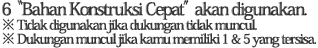
<style>
.page{position:relative;width:318px;height:48px;background:#ffffff}
.page>*{position:absolute;margin:0}
.t1{font:14px/18px "HeiseiMinStd-W7";letter-spacing:-0.08em;color:#343434}
.t2{font:18px/18px "HeiseiMinStd-W7";letter-spacing:-0.08em;color:#343434}
.t3{font:14px/14px "HeiseiMinStd-W7";letter-spacing:-0.08em;color:#343434}
</style>
<div class="page">
<p class="t1" style="left:2px;top:0px;width:315px;height:48px"><span class="t2">6 “Bahan Konstruksi Cepat” akan digunakan.<br></span><span class="t3">※ Tidak digunakan jika dukungan tidak muncul.<br></span>※ Dukungan muncul jika kamu memiliki 1 &amp; 5 yang tersisa.</p>
</div>
